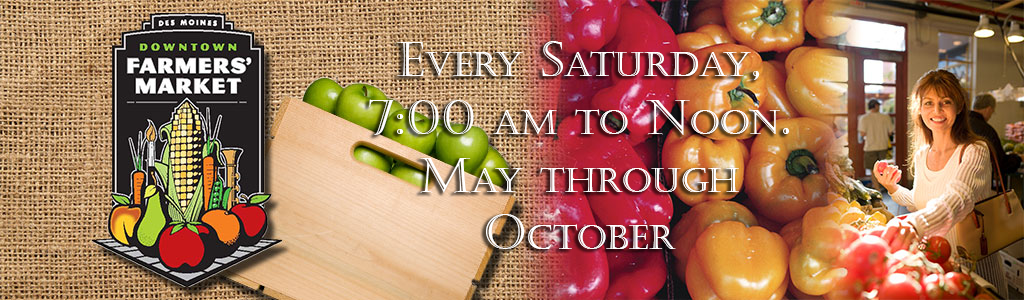
<style>
.page{position:relative;width:1024px;height:300px}
.page>*{position:absolute;margin:0}
.t1{font:48px "Castellar";letter-spacing:0.01em;color:#ffffff;font-variant:small-caps}
</style>
<div class="page">
<p class="t1" style="left:369px;top:41px;width:421px;height:208px;text-align:center">Every Saturday, 7:00 am to Noon. May through October</p>
</div>
